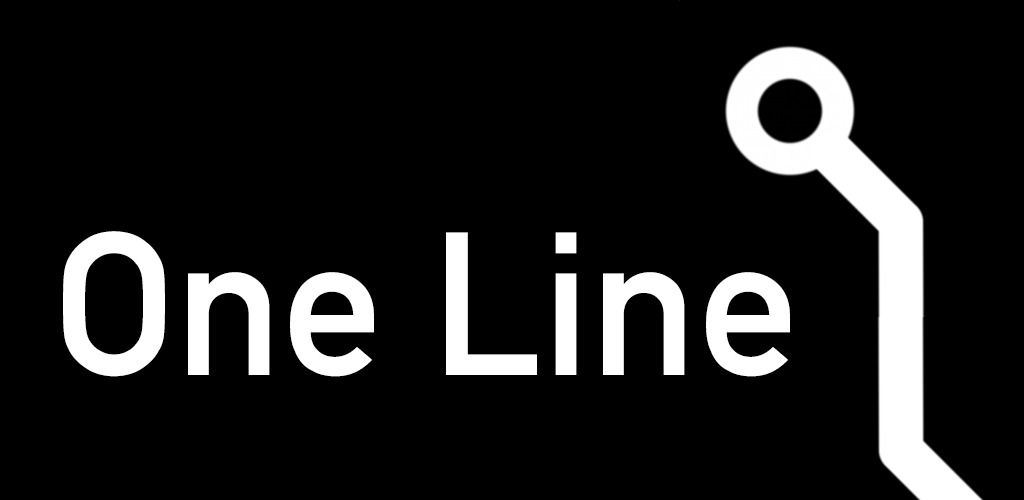
<style>
.page{position:relative;width:1024px;height:500px;background:#000000}
.page>*{position:absolute;margin:0}
.t1{font:200px "DINAlternate-Bold";letter-spacing:0.001em;color:#ffffff}
</style>
<div class="page">
<p class="t1" style="left:63px;top:231px;width:727px;height:146px">One Line</p>
</div>
